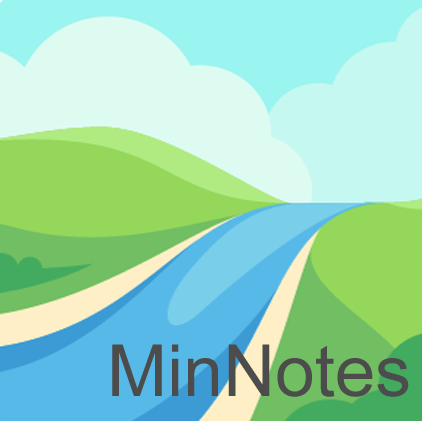
<style>
.page{position:relative;width:422px;height:421px}
.page>*{position:absolute;margin:0}
.t1{font:72px "ArialMT";color:#4c4c4c}
</style>
<div class="page">
<p class="t1" style="left:112px;top:344px;width:297px;height:53px">MinNotes</p>
</div>
